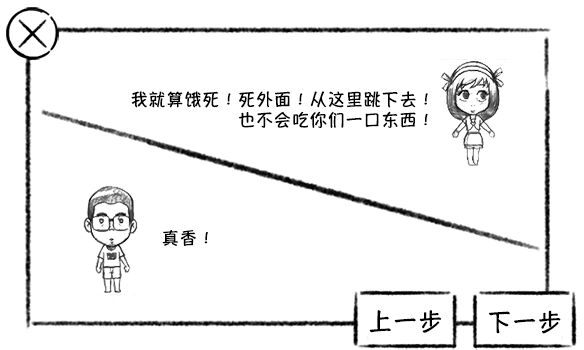
<style>
.page{position:relative;width:584px;height:350px;background:#ffffff}
.page>*{position:absolute;margin:0}
.t1{font:17px "HannotateSC-W7";letter-spacing:0.055em;color:#000000}
.t2{font:23.8px "HannotateSC-W7";letter-spacing:0.055em;color:#000000}
</style>
<div class="page">
<p class="t1" style="left:131px;top:91px;width:297px;height:17px">我就算饿死！死外面！从这里跳下去！</p>
<p class="t1" style="left:239px;top:111px;width:189px;height:17px">也不会吃你们一口东西！</p>
<p class="t1" style="left:162px;top:230px;width:46px;height:16px">真香！</p>
<p class="t2" style="left:369px;top:310px;width:73px;height:23px">上一步</p>
<p class="t2" style="left:489px;top:310px;width:72px;height:24px">下一步</p>
</div>
